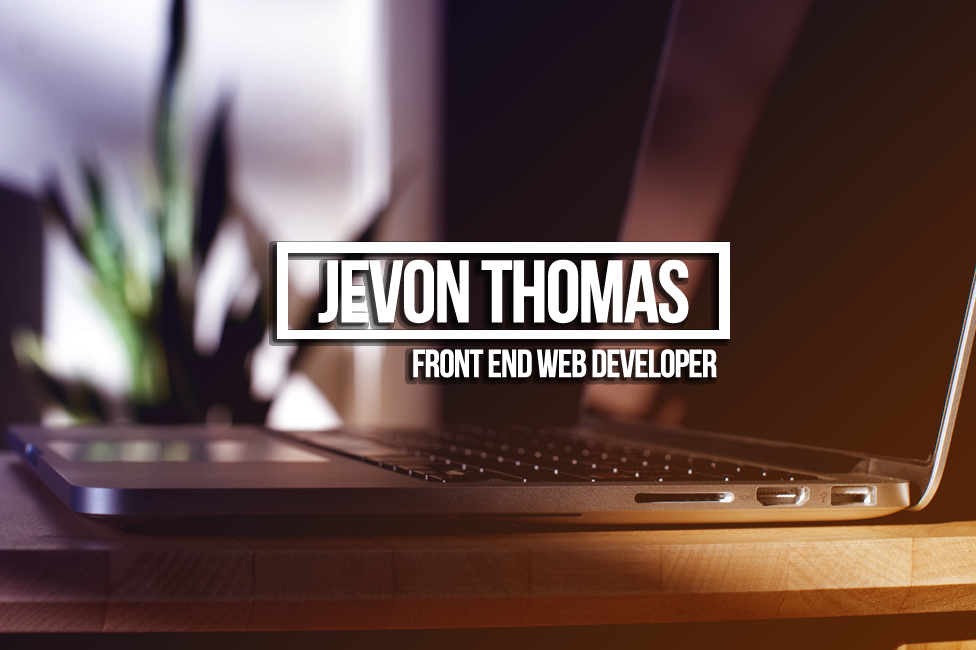
<style>
.page{position:relative;width:976px;height:650px}
.page>*{position:absolute;margin:0}
.t1{font:87.5px "BebasNeue";letter-spacing:-0.05em;color:#ffffff;font-weight:bold}
.t2{font:38.9px "BebasNeue";letter-spacing:-0.05em;color:#ffffff;font-weight:bold}
</style>
<div class="page">
<p class="t1" style="left:318px;top:259px;width:371px;height:65px">Jevon Thomas</p>
<p class="t2" style="left:413px;top:349px;width:304px;height:29px">Front End Web Developer</p>
</div>
